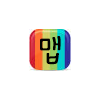
<style>
.page{position:relative;width:100px;height:100px;background:#ffffff}
.page>*{position:absolute;margin:0}
.t1{font:30px "SDAquaBlueTTF-aLt";letter-spacing:-0.025em;color:#010000;font-weight:bold;scale:0.96 1}
</style>
<div class="page">
<p class="t1" style="left:40px;top:36px;width:21px;height:29px">맵</p>
</div>
